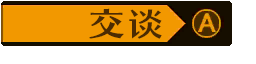
<style>
.page{position:relative;width:256px;height:64px;background:#ffffff}
.page>*{position:absolute;margin:0}
.t1{font:32px "SkipStd-B";letter-spacing:0.125em;color:#4c2b02;scale:1.1 1}
.t2{font:32px "FZYASHS_ZHONG--GB1-0";letter-spacing:0.125em;color:#4c2b02;scale:1.1 1}
</style>
<div class="page">
<p class="t1" style="left:89px;top:8px;width:73px;height:31px">交<span class="t2">谈</span></p>
</div>
